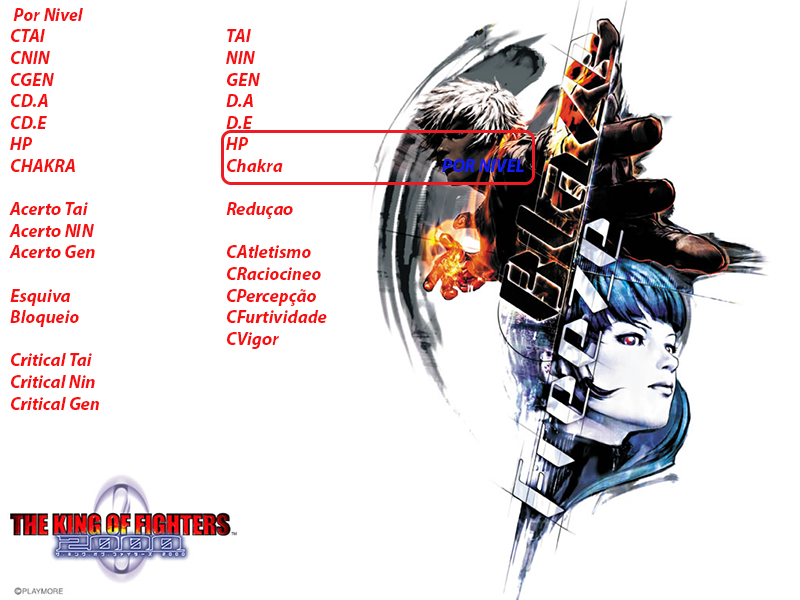
<style>
.page{position:relative;width:800px;height:600px;background:#ffffff}
.page>*{position:absolute;margin:0}
.t1{font:18px "MyriadPro-BoldIt";color:#f51111}
.t2{font:18px "MyriadPro-BoldIt";color:#111cf5}
</style>
<div class="page">
<p class="t1" style="left:9px;top:8px;width:515px;height:402px">Por Nivel<br>CTAI      TAI<br>CNIN     NIN<br>CGEN     GEN<br>CD.A     D.A    <br>CD.E     D.E<br>HP      HP<br>CHAKRA     Chakra     <span class="t2">POR NIVEL<br></span><br>Acerto Tai    Reduçao<br>Acerto NIN    <br>Acerto Gen    CAtletismo<br>      CRaciocineo<br>Esquiva     CPercepção<br>Bloqueio     CFurtividade<br>      CVigor<br>Critical Tai<br>Critical Nin<br>Critical Gen</p>
</div>
